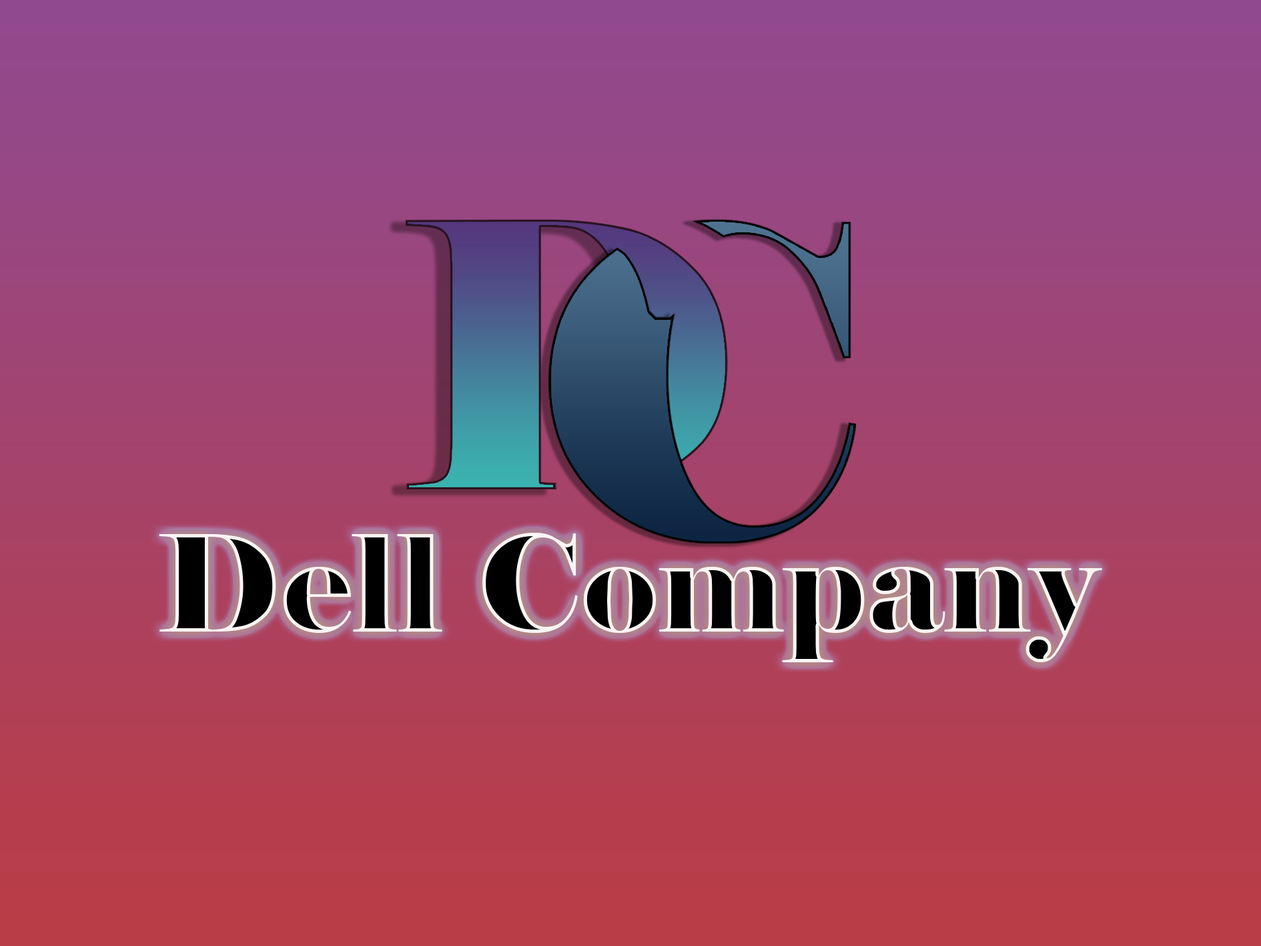
<style>
.page{position:relative;width:1261px;height:946px}
.page>*{position:absolute;margin:0}
.t1{font:133.5px "Elephant-Regular";color:#000000}
</style>
<div class="page">
<p class="t1" style="left:159px;top:532px;width:943px;height:130px">Dell Company</p>
</div>
